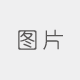
<style>
.page{position:relative;width:80px;height:80px;background:#efeff0}
.page>*{position:absolute;margin:0}
.t1{font:21.8px "YouYuan";letter-spacing:0.2em;color:#595757}
</style>
<div class="page">
<p class="t1" style="left:18px;top:29px;width:45px;height:21px">图片</p>
</div>
